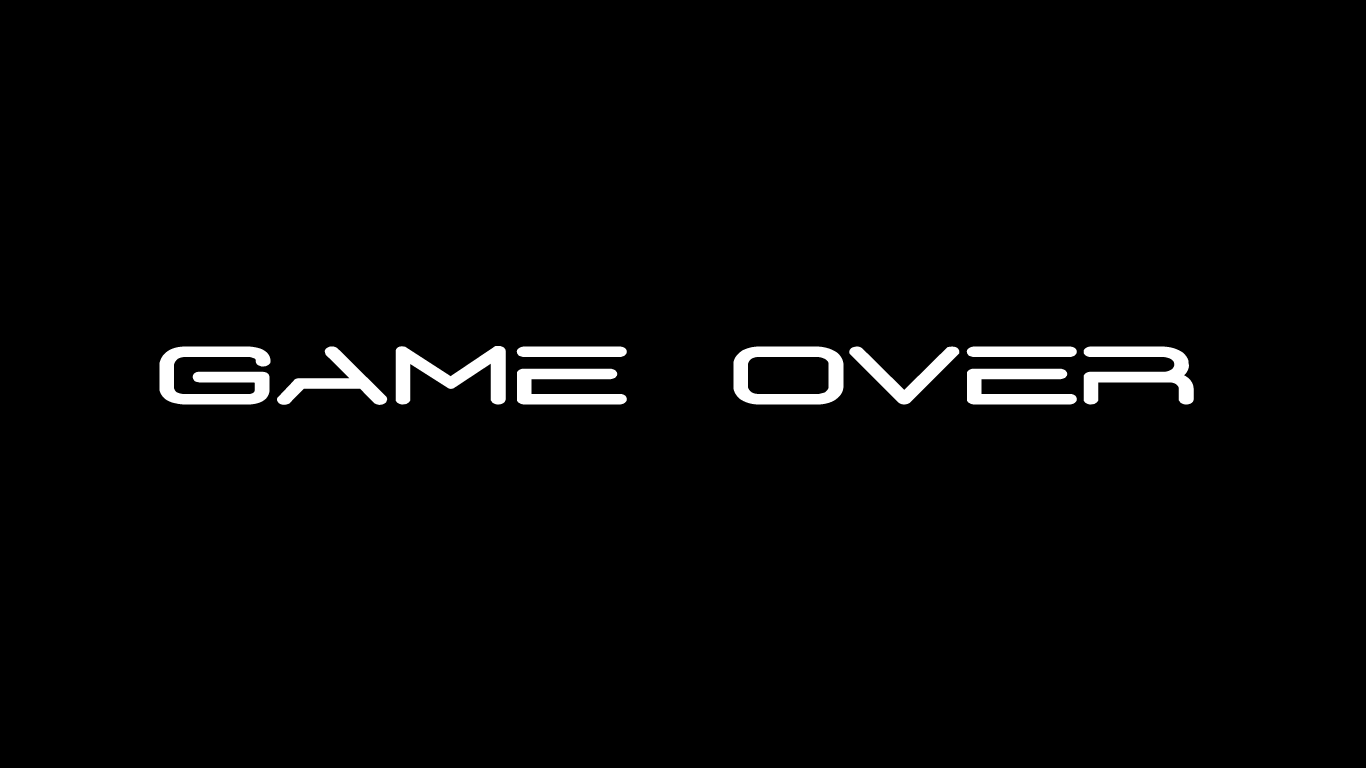
<style>
.page{position:relative;width:1366px;height:768px;background:#000000}
.page>*{position:absolute;margin:0}
.t1{font:80.8px "D3-Euronism";letter-spacing:0.01em;color:#ffffff;font-weight:bold;scale:1.51 1}
</style>
<div class="page">
<p class="t1" style="left:159px;top:346px;width:1035px;height:59px">GAME OVER</p>
</div>
